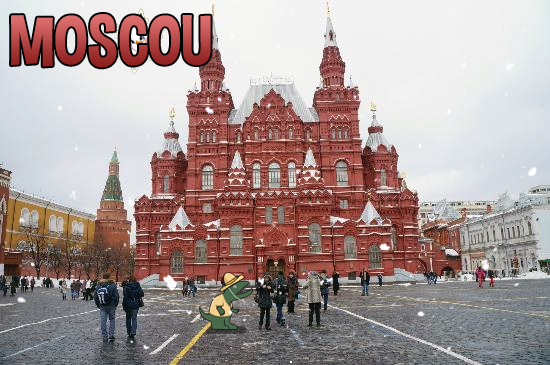
<style>
.page{position:relative;width:550px;height:365px}
.page>*{position:absolute;margin:0}
.t1{font:70px "DimboRegular"}
</style>
<div class="page">
<p class="t1" style="left:11px;top:14px;width:200px;height:54px">MOSCOU</p>
</div>
